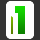
<style>
.page{position:relative;width:40px;height:40px;background:#ffffff}
.page>*{position:absolute;margin:0}
.t1{font:36.4px "04b19"}
</style>
<div class="page">
<p class="t1" style="left:15px;top:6px;width:10px;height:28px">1</p>
</div>
